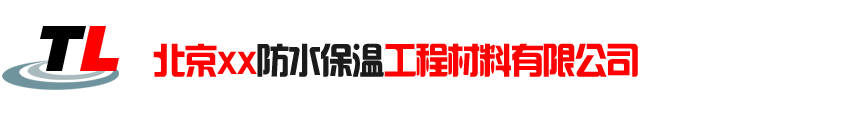
<style>
.page{position:relative;width:852px;height:118px;background:#ffffff}
.page>*{position:absolute;margin:0}
.t1{font:36px "¹ã½Ý¾ÓÃÔÄã×Ö¿â";letter-spacing:-0.05em;color:#ff0000;scale:0.93 1}
.t2{font:36px "¹ã½Ý¾ÓÃÔÄã×Ö¿â";letter-spacing:-0.05em;color:#1b1b1b;scale:0.93 1}
</style>
<div class="page">
<p class="t1" style="left:153px;top:43px;width:485px;height:34px">北京xx<span class="t2">防水保温</span>工程材料有限公司</p>
</div>
